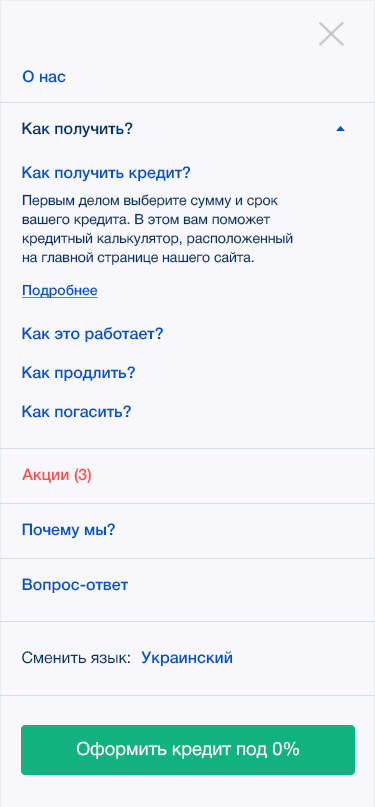
<style>
.page{position:relative;width:375px;height:807px;background:#f8f7fc}
.page>*{position:absolute;margin:0}
.t1{font:16px "HelveticaNeueCyr-Medium";color:#0054c1}
.t2{font:16px "HelveticaNeueCyr-Medium";color:#003568}
.t3{font:14px/19px "HelveticaNeueCyr-Roman";color:#003466}
.t4{font:14px "HelveticaNeueCyr-Medium";color:#0054c1;text-decoration:underline}
.t5{font:16px/24px "HelveticaNeueCyr-Medium";color:#0054c1}
.t6{font:16px "HelveticaNeueCyr-Medium";color:#ff524f}
.t7{font:16px "HelveticaNeueCyr-Roman";color:#003568}
.t8{font:18.3px "HelveticaNeueCyr-Roman";color:#ffffff}
</style>
<div class="page">
<p class="t1" style="left:22px;top:70px;width:44px;height:13px">О нас</p>
<p class="t2" style="left:22px;top:122px;width:111px;height:16px">Как получить?</p>
<p class="t1" style="left:22px;top:166px;width:169px;height:16px">Как получить кредит?</p>
<p class="t3" style="left:22px;top:194px;width:271px;height:71px">Первым делом выберите сумму и срок вашего кредита. В этом вам поможет кредитный калькулятор, расположенный на главной странице нашего сайта.</p>
<p class="t4" style="left:22px;top:284px;width:76px;height:14px">Подробнее</p>
<p class="t5" style="left:22px;top:327px;width:141px;height:91px">Как это работает?<br>Как продлить?<br>Как погасить?</p>
<p class="t6" style="left:22px;top:468px;width:69px;height:16px">Акции (3)</p>
<p class="t1" style="left:22px;top:523px;width:93px;height:16px">Почему мы?</p>
<p class="t1" style="left:22px;top:578px;width:107px;height:16px">Вопрос-ответ</p>
<p class="t7" style="left:22px;top:651px;width:108px;height:13px">Сменить язык:</p>
<p class="t1" style="left:141px;top:651px;width:92px;height:16px">Украинский</p>
<p class="t8" style="left:76px;top:741px;width:224px;height:18px">Оформить кредит под 0%</p>
</div>
